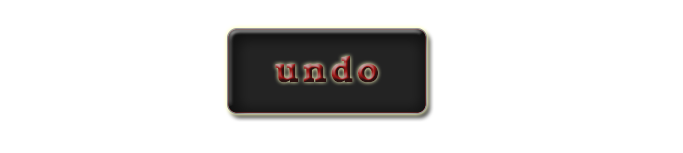
<style>
.page{position:relative;width:683px;height:153px;background:#ffffff}
.page>*{position:absolute;margin:0}
.t1{font:36px "BookmanOldStyle-Bold";letter-spacing:0.1em}
</style>
<div class="page">
<p class="t1" style="left:275px;top:56px;width:103px;height:27px">undo</p>
</div>
